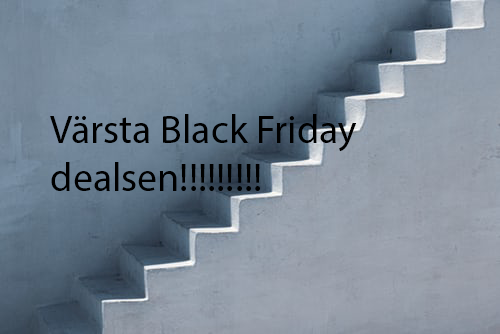
<style>
.page{position:relative;width:500px;height:334px}
.page>*{position:absolute;margin:0}
.t1{font:40px "MyriadPro-Regular";color:#000000}
.t2{font:12px "MyriadPro-Regular";color:#000000}
</style>
<div class="page">
<p class="t1" style="left:50px;top:114px;width:307px;height:77px"><span class="t2"><br><br><br></span>Värsta Black Friday      dealsen!!!!!!!!!</p>
</div>
